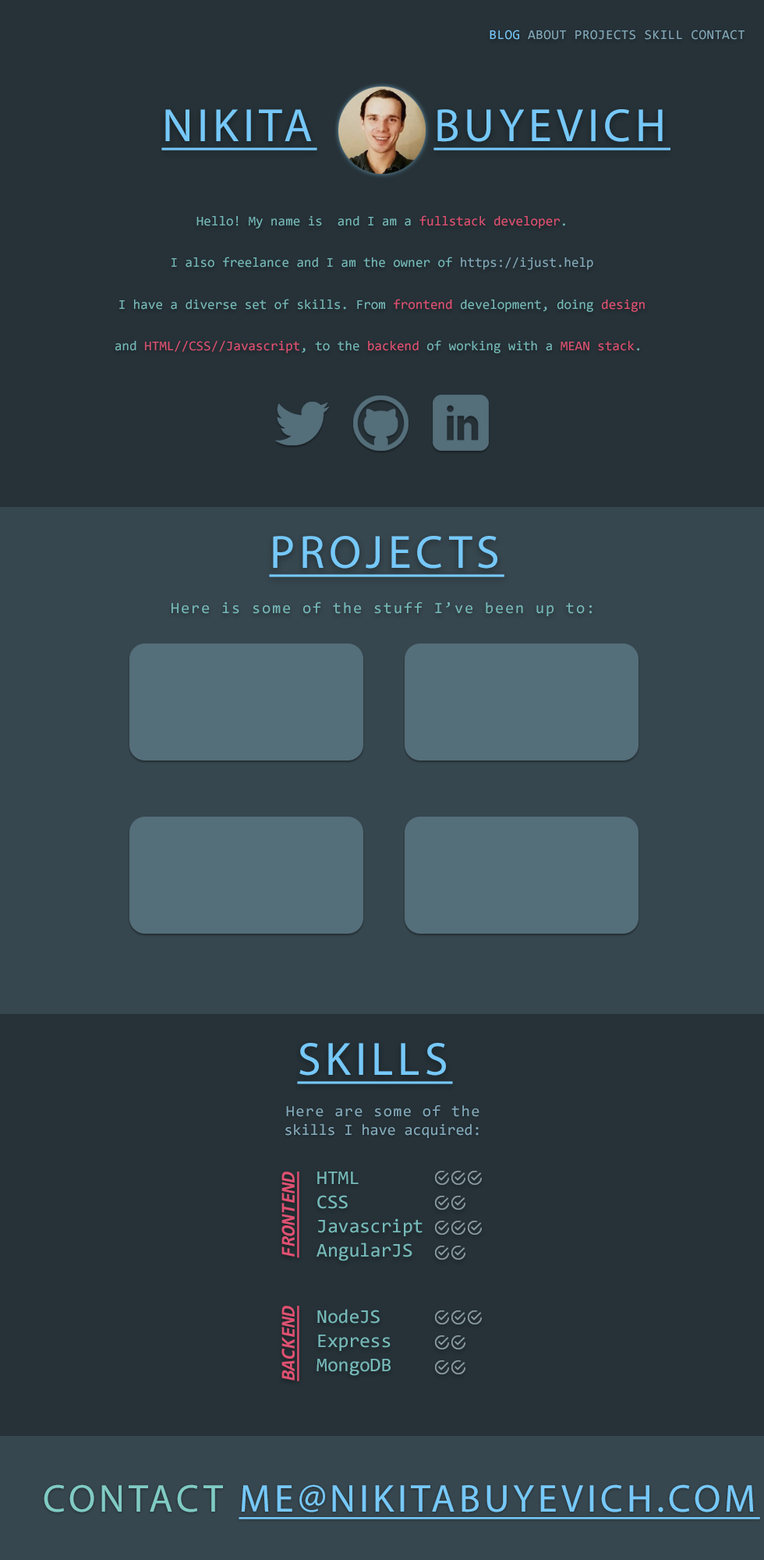
<style>
.page{position:relative;width:764px;height:1560px;background:#263238}
.page>*{position:absolute;margin:0}
.t1{font:13.5px "Consolas";letter-spacing:0.025em;color:#84aabb;text-transform:uppercase}
.t2{font:13.5px "Consolas";letter-spacing:0.025em;color:#76c8f8;text-transform:uppercase}
.t3{font:46.8px "MyriadPro-Regular";letter-spacing:0.1em;color:#76c8f8;text-transform:uppercase;text-decoration:underline}
.t4{font:13.5px/41.6px "Consolas";color:#76b9b9}
.t5{font:13.5px/41.6px "Consolas";color:#76b9b9;text-transform:uppercase}
.t6{font:13.5px/41.6px "Consolas";color:#df5172}
.t7{font:13.5px/41.6px "Consolas";color:#84aabb}
.t8{font:15.6px "Consolas";letter-spacing:0.1em;color:#76b9b9}
.t9{font:15.6px "Consolas";color:#84aabb}
.t10{font:15.6px "Consolas";letter-spacing:0.075em;color:#84aabb}
.t11{font:19.5px "Consolas-BoldItalic";color:#df5172;text-decoration:underline}
.t12{font:19.5px "Consolas";color:#76b9b9}
.t13{font:39px "MyriadPro-Regular";letter-spacing:0.1em;color:#76c8f8;text-transform:uppercase;text-decoration:underline}
.t14{font:39px "MyriadPro-Regular";letter-spacing:0.1em;color:#80cbc4;text-transform:uppercase}
</style>
<div class="page">
<p class="t1" style="left:490px;top:30px;width:255px;height:10px"><span class="t2">BLOG</span> ABOUT PROJECTS SKILL CONTACT</p>
<p class="t3" style="left:161px;top:109px;width:156px;height:42px">Nikita</p>
<p class="t3" style="left:434px;top:109px;width:237px;height:42px">Buyevich</p>
<p class="t4" style="left:115px;top:215px;width:530px;height:138px;text-align:center"><span class="t5">H</span>ello! My name is  and I am a <span class="t6">fullstack developer</span>.<br>I also freelance and I am the owner of <span class="t7">https://ijust.help<br></span>I have a diverse set of skills. From <span class="t6">frontend</span> development, doing <span class="t6">design<br></span>and <span class="t6">HTML//CSS//Javascript</span>, to the <span class="t6">backend </span>of working with a <span class="t6">MEAN stack</span>.</p>
<p class="t3" style="left:269px;top:536px;width:236px;height:41px">PROJECTS</p>
<p class="t8" style="left:172px;top:602px;width:420px;height:14px">Here is some of the stuff I’ve been up to:</p>
<p class="t3" style="left:297px;top:1043px;width:156px;height:41px">Skills</p>
<p class="t9" style="left:285px;top:1105px;width:195px;height:33px;text-align:center"><span class="t10">Here are some of the<br></span>skills I have acquired:</p>
<p class="t11" style="left:282px;top:1172px;width:18px;height:86px;rotate:-90deg">FRONTEND</p>
<p class="t12" style="left:317px;top:1172px;width:42px;height:12px">HTML</p>
<p class="t12" style="left:317px;top:1195px;width:31px;height:14px">CSS</p>
<p class="t12" style="left:318px;top:1218px;width:105px;height:18px">Javascript</p>
<p class="t12" style="left:317px;top:1243px;width:96px;height:18px">AngularJS</p>
<p class="t11" style="left:282px;top:1306px;width:18px;height:75px;rotate:-90deg">BACKEND</p>
<p class="t12" style="left:317px;top:1309px;width:63px;height:15px">NodeJS</p>
<p class="t12" style="left:318px;top:1335px;width:73px;height:16px">Express</p>
<p class="t12" style="left:317px;top:1359px;width:74px;height:17px">MongoDB</p>
<p class="t13" style="left:44px;top:1484px;width:716px;height:35px"><span class="t14">CONTACT </span>ME@NIKITABUYEVICH.COM</p>
</div>
